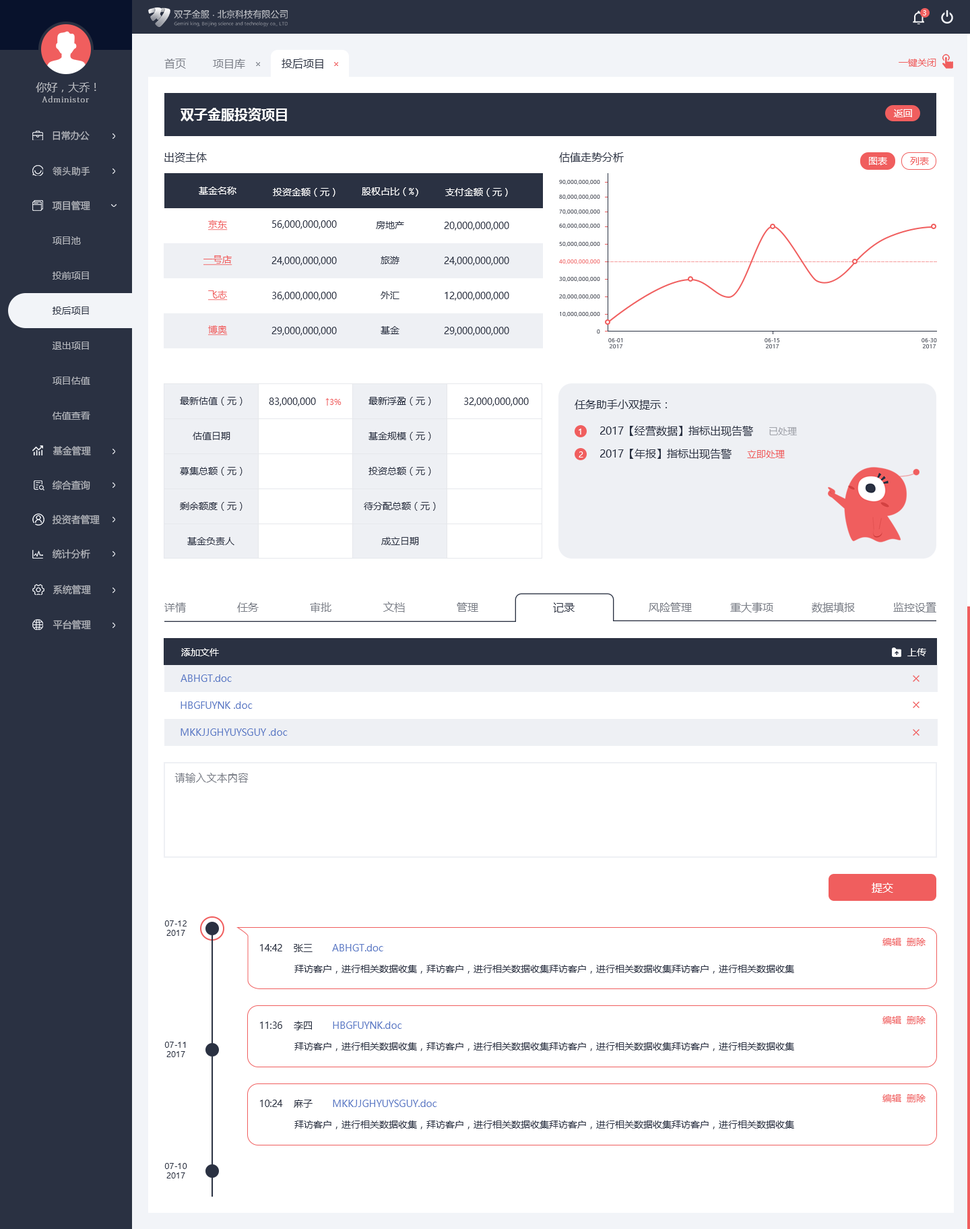
<style>
.page{position:relative;width:970px;height:1229px;background:#ffffff}
.page>*{position:absolute;margin:0}
.t1{font:6.7px "MicrosoftYaHeiUI";color:#ffffff}
.t2{font:10.8px "MicrosoftYaHeiMono";color:#7b7f88}
.t3{font:10.8px "MicrosoftYaHeiMono";color:#2a3142}
.t4{font:9.4px "MicrosoftYaHeiMono";color:#f05e5e}
.t5{font:10.8px "MicrosoftYaHeiMono";color:#b4b7bd}
.t6{font:8.1px "AdobeFangsongStd-Regular";letter-spacing:0.1em;color:#b4b7bd}
.t7{font:13.5px "MicrosoftYaHeiUI-Bold";color:#ffffff}
.t8{font:9.4px "MicrosoftYaHeiUI";color:#ffffff}
.t9{font:9.4px "MicrosoftYaHeiUI";color:#b4b7bd}
.t10{font:10.8px "MicrosoftYaHeiUI";color:#2a3142}
.t11{font:9.4px "MicrosoftYaHeiUI";color:#f05e5e}
.t12{font:9.4px "PingFang-SC-Medium";color:#b4b7bd}
.t13{font:5.4px "MicrosoftYaHeiUI"}
.t14{font:9.4px "MicrosoftYaHeiMono";color:#ffffff}
.t15{font:9.4px "MicrosoftYaHeiMono";color:#f05e5e;text-decoration:underline}
.t16{font:9.4px "MicrosoftYaHeiUI";color:#2a3142}
.t17{font:9.4px "MicrosoftYaHeiMono";color:#2a3142}
.t18{font:5.4px "MicrosoftYaHeiUI";color:#2a3142}
.t19{font:8.1px "MicrosoftYaHeiUI";color:#f05e5e}
.t20{font:8.1px "MicrosoftYaHeiUI";color:#ffffff}
.t21{font:9.4px "MicrosoftYaHeiUI";color:#a0a3aa}
.t22{font:10.8px "MicrosoftYaHeiUI";color:#7b7f88}
.t23{font:9.4px "MicrosoftYaHeiUI";color:#5b7ac6}
.t24{font:10.8px "PingFang-SC-Medium";letter-spacing:-0.02em;color:#7b7f88}
.t25{font:10.8px "MicrosoftYaHeiUI";color:#ffffff}
.t26{font:8.1px "MicrosoftYaHeiUI";color:#2a3142}
</style>
<div class="page">
<p class="t1" style="left:923px;top:10px;width:3px;height:5px">3</p>
<p class="t2" style="left:164px;top:59px;width:22px;height:10px">首页</p>
<p class="t2" style="left:213px;top:59px;width:32px;height:10px">项目库</p>
<p class="t3" style="left:282px;top:59px;width:41px;height:10px">投后项目</p>
<p class="t4" style="left:899px;top:59px;width:38px;height:8px">一键关闭</p>
<p class="t5" style="left:36px;top:82px;width:60px;height:10px">你好，大乔！</p>
<p class="t6" style="left:42px;top:96px;width:47px;height:6px">Administor</p>
<p class="t7" style="left:181px;top:108px;width:106px;height:13px">双子金服投资项目</p>
<p class="t8" style="left:894px;top:109px;width:18px;height:8px">返回</p>
<p class="t9" style="left:53px;top:131px;width:37px;height:9px">日常办公</p>
<p class="t10" style="left:164px;top:152px;width:43px;height:10px">出资主体</p>
<p class="t10" style="left:559px;top:152px;width:65px;height:10px">估值走势分析</p>
<p class="t8" style="left:869px;top:157px;width:18px;height:8px">图表</p>
<p class="t11" style="left:910px;top:157px;width:19px;height:8px">列表</p>
<p class="t12" style="left:53px;top:166px;width:37px;height:10px">领头助手</p>
<p class="t13" style="left:559px;top:179px;width:41px;height:6px">90,000,000,000</p>
<p class="t14" style="left:199px;top:187px;width:37px;height:8px">基金名称</p>
<p class="t14" style="left:273px;top:188px;width:63px;height:9px">投资金额（元）</p>
<p class="t14" style="left:362px;top:187px;width:56px;height:10px">股权占比（%)</p>
<p class="t14" style="left:445px;top:188px;width:63px;height:9px">支付金额（元）</p>
<p class="t13" style="left:559px;top:194px;width:41px;height:6px">80,000,000,000</p>
<p class="t9" style="left:52px;top:201px;width:38px;height:10px">项目管理</p>
<p class="t13" style="left:559px;top:209px;width:41px;height:6px">70,000,000,000</p>
<p class="t15" style="left:208px;top:220px;width:20px;height:10px">京东</p>
<p class="t16" style="left:272px;top:220px;width:65px;height:9px">56,000,000,000</p>
<p class="t17" style="left:376px;top:221px;width:28px;height:8px">房地产</p>
<p class="t16" style="left:444px;top:222px;width:65px;height:8px">20,000,000,000</p>
<p class="t13" style="left:559px;top:223px;width:41px;height:6px">60,000,000,000</p>
<p class="t9" style="left:53px;top:236px;width:28px;height:9px">项目池</p>
<p class="t13" style="left:559px;top:241px;width:41px;height:6px">50,000,000,000</p>
<p class="t15" style="left:203px;top:255px;width:29px;height:10px">一号店</p>
<p class="t16" style="left:272px;top:257px;width:65px;height:8px">24,000,000,000</p>
<p class="t17" style="left:381px;top:256px;width:19px;height:8px">旅游</p>
<p class="t16" style="left:444px;top:257px;width:65px;height:8px">24,000,000,000</p>
<p class="t13" style="left:559px;top:259px;width:41px;height:6px">40,000,000,000</p>
<p class="t9" style="left:53px;top:272px;width:36px;height:8px">投前项目</p>
<p class="t13" style="left:559px;top:276px;width:41px;height:6px">30,000,000,000</p>
<p class="t15" style="left:208px;top:290px;width:20px;height:11px">飞志</p>
<p class="t16" style="left:272px;top:292px;width:65px;height:9px">36,000,000,000</p>
<p class="t17" style="left:381px;top:291px;width:19px;height:8px">外汇</p>
<p class="t16" style="left:445px;top:292px;width:64px;height:9px">12,000,000,000</p>
<p class="t13" style="left:559px;top:294px;width:41px;height:6px">20,000,000,000</p>
<p class="t16" style="left:53px;top:307px;width:36px;height:8px">投后项目</p>
<p class="t18" style="left:559px;top:311px;width:41px;height:6px">10,000,000,000</p>
<p class="t15" style="left:208px;top:325px;width:20px;height:11px">博奥</p>
<p class="t16" style="left:272px;top:327px;width:65px;height:9px">29,000,000,000</p>
<p class="t17" style="left:381px;top:326px;width:19px;height:8px">基金</p>
<p class="t16" style="left:444px;top:327px;width:65px;height:9px">29,000,000,000</p>
<p class="t13" style="left:597px;top:329px;width:3px;height:5px">0</p>
<p class="t9" style="left:53px;top:342px;width:36px;height:8px">退出项目</p>
<p class="t18" style="left:608px;top:338px;width:15px;height:10px;text-align:center">06-01<br>2017</p>
<p class="t18" style="left:765px;top:338px;width:15px;height:10px;text-align:center">06-15<br>2017</p>
<p class="t13" style="left:922px;top:338px;width:15px;height:10px;text-align:center">06-30<br>2017</p>
<p class="t9" style="left:53px;top:377px;width:37px;height:8px">项目估值</p>
<p class="t16" style="left:180px;top:397px;width:63px;height:9px">最新估值（元）</p>
<p class="t16" style="left:269px;top:398px;width:47px;height:8px">83,000,000</p>
<p class="t19" style="left:325px;top:398px;width:17px;height:8px">↑3%</p>
<p class="t16" style="left:369px;top:397px;width:62px;height:9px">最新浮盈（元）</p>
<p class="t16" style="left:464px;top:398px;width:65px;height:8px">32,000,000,000</p>
<p class="t10" style="left:575px;top:400px;width:92px;height:10px">任务助手小双提示：</p>
<p class="t9" style="left:53px;top:412px;width:37px;height:8px">估值查看</p>
<p class="t10" style="left:600px;top:426px;width:153px;height:10px">2017【经营数据】指标出现告警</p>
<p class="t16" style="left:193px;top:432px;width:37px;height:8px">估值日期</p>
<p class="t16" style="left:369px;top:432px;width:62px;height:9px">基金规模（元）</p>
<p class="t20" style="left:579px;top:429px;width:2px;height:6px">1</p>
<p class="t21" style="left:769px;top:427px;width:28px;height:8px">已处理</p>
<p class="t9" style="left:53px;top:446px;width:38px;height:9px">基金管理</p>
<p class="t10" style="left:600px;top:449px;width:132px;height:10px">2017【年报】指标出现告警</p>
<p class="t20" style="left:579px;top:451px;width:5px;height:7px">2</p>
<p class="t11" style="left:747px;top:450px;width:38px;height:8px">立即处理</p>
<p class="t16" style="left:180px;top:467px;width:63px;height:9px">募集总额（元）</p>
<p class="t16" style="left:369px;top:467px;width:62px;height:9px">投资总额（元）</p>
<p class="t9" style="left:52px;top:480px;width:38px;height:11px">综合查询</p>
<p class="t16" style="left:180px;top:502px;width:63px;height:9px">剩余额度（元）</p>
<p class="t16" style="left:364px;top:502px;width:72px;height:9px">待分配总额（元）</p>
<p class="t9" style="left:52px;top:515px;width:48px;height:9px">投资者管理</p>
<p class="t16" style="left:187px;top:537px;width:47px;height:8px">基金负责人</p>
<p class="t16" style="left:381px;top:537px;width:38px;height:8px">成立日期</p>
<p class="t9" style="left:52px;top:549px;width:38px;height:10px">统计分析</p>
<p class="t9" style="left:53px;top:585px;width:38px;height:9px">系统管理</p>
<p class="t22" style="left:164px;top:602px;width:22px;height:10px">详情</p>
<p class="t22" style="left:237px;top:602px;width:22px;height:10px">任务</p>
<p class="t22" style="left:310px;top:602px;width:22px;height:10px">审批</p>
<p class="t22" style="left:383px;top:602px;width:22px;height:10px">文档</p>
<p class="t22" style="left:457px;top:602px;width:21px;height:10px">管理</p>
<p class="t10" style="left:553px;top:602px;width:22px;height:10px">记录</p>
<p class="t22" style="left:649px;top:602px;width:43px;height:10px">风险管理</p>
<p class="t22" style="left:730px;top:602px;width:44px;height:10px">重大事项</p>
<p class="t22" style="left:812px;top:602px;width:43px;height:10px">数据填报</p>
<p class="t22" style="left:893px;top:602px;width:44px;height:10px">监控设置</p>
<p class="t9" style="left:53px;top:620px;width:38px;height:9px">平台管理</p>
<p class="t8" style="left:181px;top:648px;width:38px;height:8px">添加文件</p>
<p class="t14" style="left:908px;top:648px;width:18px;height:8px">上传</p>
<p class="t23" style="left:181px;top:674px;width:51px;height:8px">ABHGT.doc</p>
<p class="t23" style="left:181px;top:701px;width:72px;height:8px">HBGFUYNK .doc</p>
<p class="t23" style="left:181px;top:728px;width:107px;height:8px">MKKJJGHYUYSGUY .doc</p>
<p class="t24" style="left:175px;top:773px;width:74px;height:10px">请输入文本内容</p>
<p class="t25" style="left:872px;top:883px;width:21px;height:10px">提交</p>
<p class="t26" style="left:164px;top:920px;width:23px;height:16px;text-align:center">07-12<br>2017</p>
<p class="t4" style="left:883px;top:938px;width:43px;height:8px">编辑 删除</p>
<p class="t16" style="left:260px;top:944px;width:22px;height:7px">14:42</p>
<p class="t16" style="left:294px;top:944px;width:19px;height:8px">张三</p>
<p class="t23" style="left:332px;top:944px;width:51px;height:7px">ABHGT.doc</p>
<p class="t16" style="left:294px;top:965px;width:500px;height:9px">拜访客户，进行相关数据收集，拜访客户，进行相关数据收集拜访客户，进行相关数据收集拜访客户，进行相关数据收集</p>
<p class="t16" style="left:260px;top:1021px;width:22px;height:8px">11:36</p>
<p class="t16" style="left:294px;top:1021px;width:18px;height:9px">李四</p>
<p class="t23" style="left:333px;top:1021px;width:69px;height:8px">HBGFUYNK.doc</p>
<p class="t4" style="left:883px;top:1016px;width:43px;height:8px">编辑 删除</p>
<p class="t26" style="left:164px;top:1042px;width:22px;height:15px;text-align:center">07-11<br>2017</p>
<p class="t16" style="left:294px;top:1042px;width:500px;height:9px">拜访客户，进行相关数据收集，拜访客户，进行相关数据收集拜访客户，进行相关数据收集拜访客户，进行相关数据收集</p>
<p class="t4" style="left:883px;top:1094px;width:43px;height:8px">编辑 删除</p>
<p class="t16" style="left:260px;top:1100px;width:23px;height:7px">10:24</p>
<p class="t16" style="left:294px;top:1100px;width:19px;height:8px">麻子</p>
<p class="t23" style="left:333px;top:1100px;width:104px;height:7px">MKKJJGHYUYSGUY.doc</p>
<p class="t16" style="left:294px;top:1121px;width:500px;height:8px">拜访客户，进行相关数据收集，拜访客户，进行相关数据收集拜访客户，进行相关数据收集拜访客户，进行相关数据收集</p>
<p class="t26" style="left:164px;top:1163px;width:23px;height:15px;text-align:center">07-10<br>2017</p>
</div>
